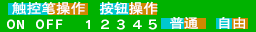
<style>
.page{position:relative;width:256px;height:32px;background:#00b200}
.page>*{position:absolute;margin:0}
.t1{font:13.2px "DFPHeiW5-GB";color:#ffffff;scale:1.11 1}
.t2{font:12.8px "DFPHeiW5-GB";color:#ffffff;scale:1.16 1}
</style>
<div class="page">
<p class="t1" style="left:12px;top:1px;width:73px;height:14px">触控笔操作</p>
<p class="t1" style="left:99px;top:1px;width:59px;height:14px">按钮操作</p>
<p class="t2" style="left:170px;top:17px;width:28px;height:12px">普通</p>
<p class="t2" style="left:219px;top:17px;width:26px;height:12px">自由</p>
</div>
